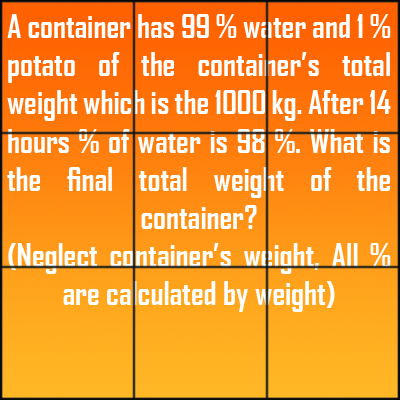
<style>
.page{position:relative;width:400px;height:400px}
.page>*{position:absolute;margin:0}
.t1{font:31.8px "AgencyFB-Bold";color:#ffffff}
</style>
<div class="page">
<p class="t1" style="left:7px;top:14px;width:384px;height:298px;text-align:justify">A container has 99 % water and 1 % potato of the container’s total weight which is the 1000 kg. After 14 hours % of water is 98 %. What is the final total weight of the container?<br>(Neglect container’s weight, All % are calculated by weight)</p>
</div>
